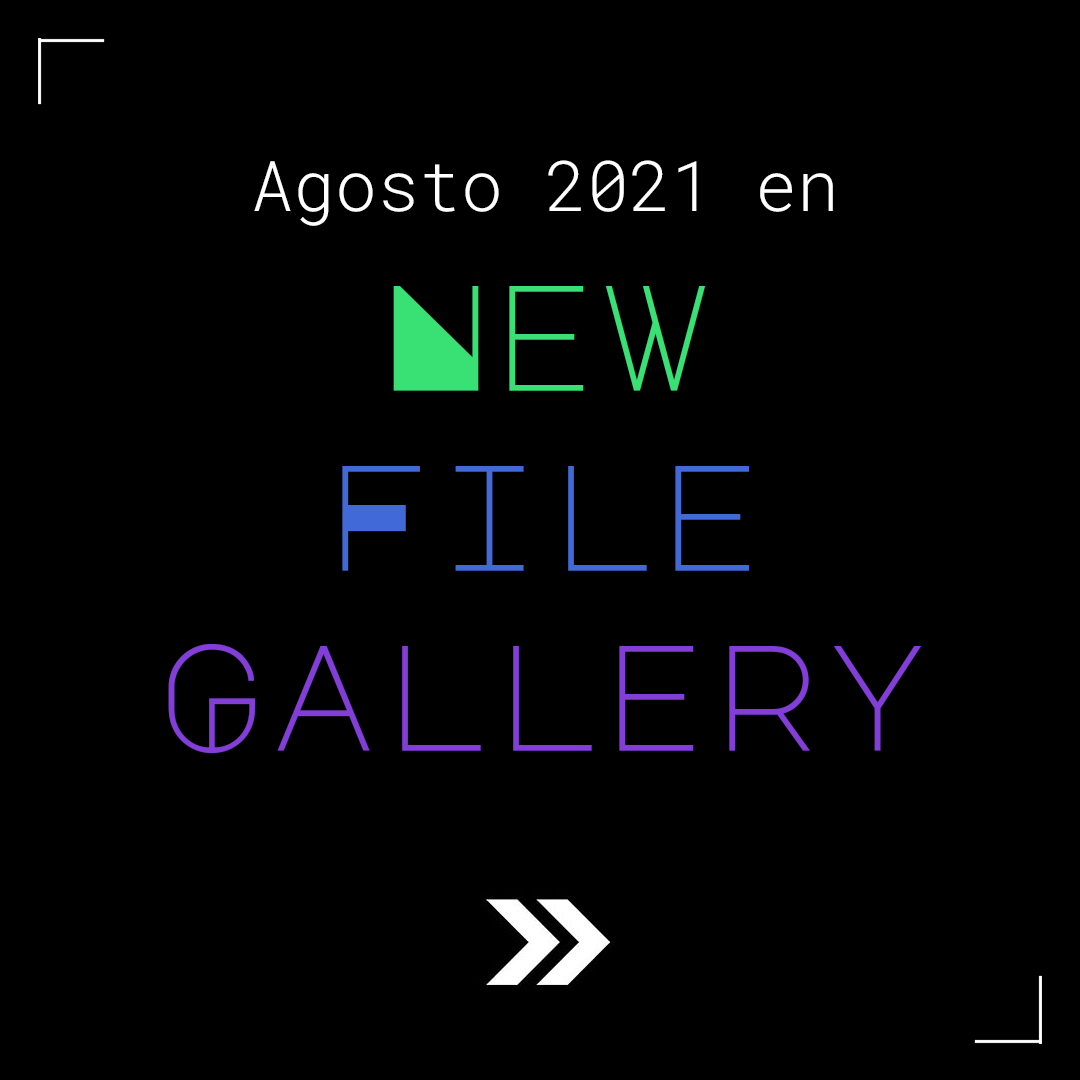
<style>
.page{position:relative;width:1080px;height:1080px;background:#000000}
.page>*{position:absolute;margin:0}
.t1{font:70px "RobotoMono-Light";color:#ffffff}
.t2{font:150px "MajorMonoDisplay-Regular";color:#39e174}
.t3{font:150px "MajorMonoDisplay-Regular";color:#416ad8}
.t4{font:150px "MajorMonoDisplay-Regular";color:#833ed9}
</style>
<div class="page">
<p class="t1" style="left:168px;top:160px;width:753px;height:593px;text-align:center">Agosto 2021 en<br><span class="t2">New </span><span class="t3">File </span><span class="t4">Gallery</span></p>
</div>
